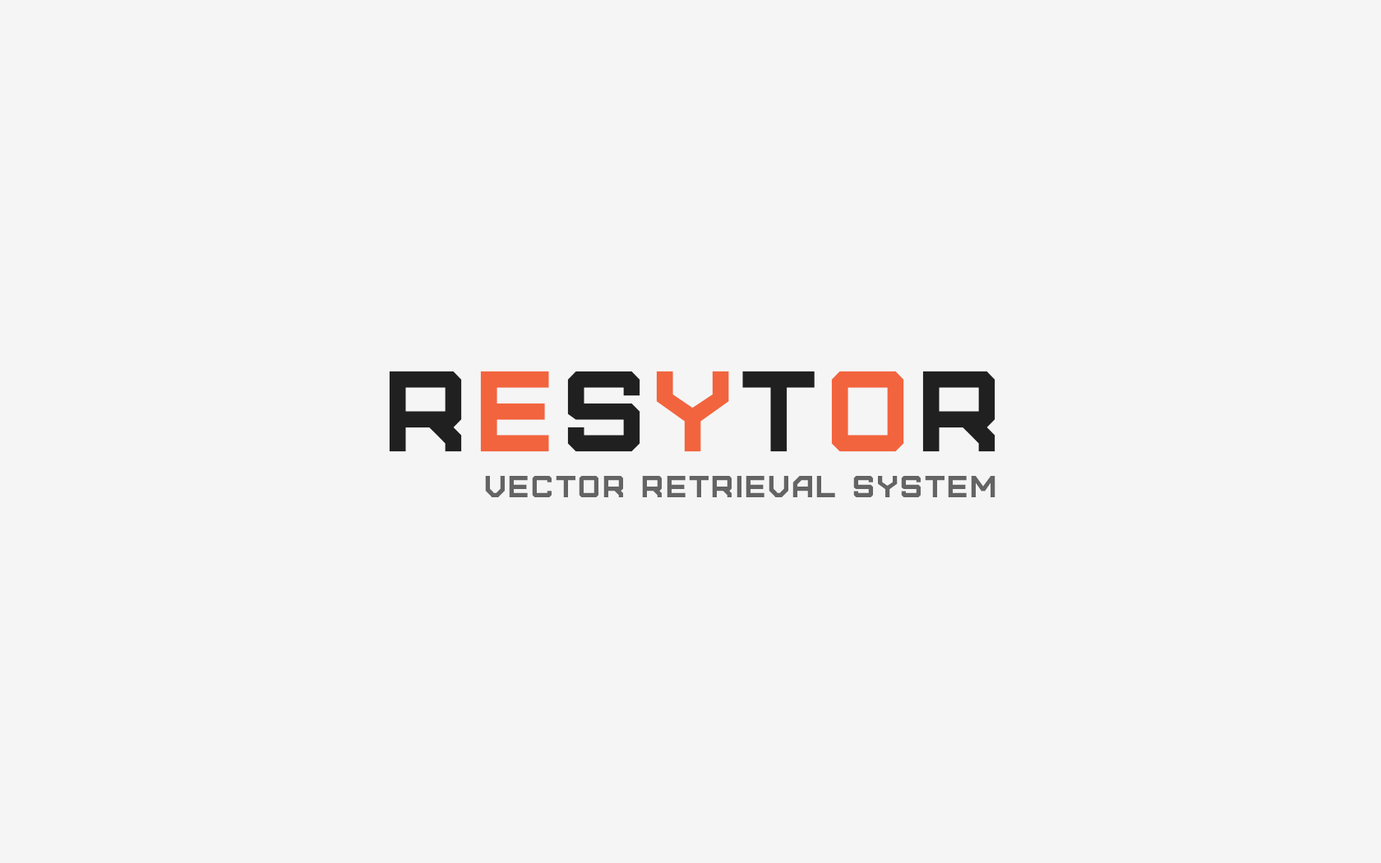
<style>
.page{position:relative;width:1381px;height:863px;background:#f5f5f5}
.page>*{position:absolute;margin:0}
.t1{font:113.9px "Furore";letter-spacing:0.05em;color:#202020;text-transform:uppercase;font-weight:bold}
.t2{font:113.9px "Furore";letter-spacing:0.05em;color:#f2643d;text-transform:uppercase;font-weight:bold}
.t3{font:30.4px "Furore";letter-spacing:0.075em;color:#646464;text-transform:uppercase}
</style>
<div class="page">
<p class="t1" style="left:389px;top:371px;width:607px;height:81px">R<span class="t2">e</span>s<span class="t2">y</span>t<span class="t2">o</span>r</p>
<p class="t3" style="left:485px;top:476px;width:511px;height:21px">vector retrieval system</p>
</div>
